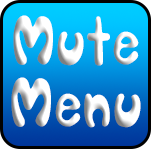
<style>
.page{position:relative;width:151px;height:149px}
.page>*{position:absolute;margin:0}
.t1{font:52px "SORRY_SORRY";letter-spacing:0.03em}
</style>
<div class="page">
<p class="t1" style="left:11px;top:15px;width:130px;height:113px;text-align:center">Mute<br>Menu</p>
</div>
